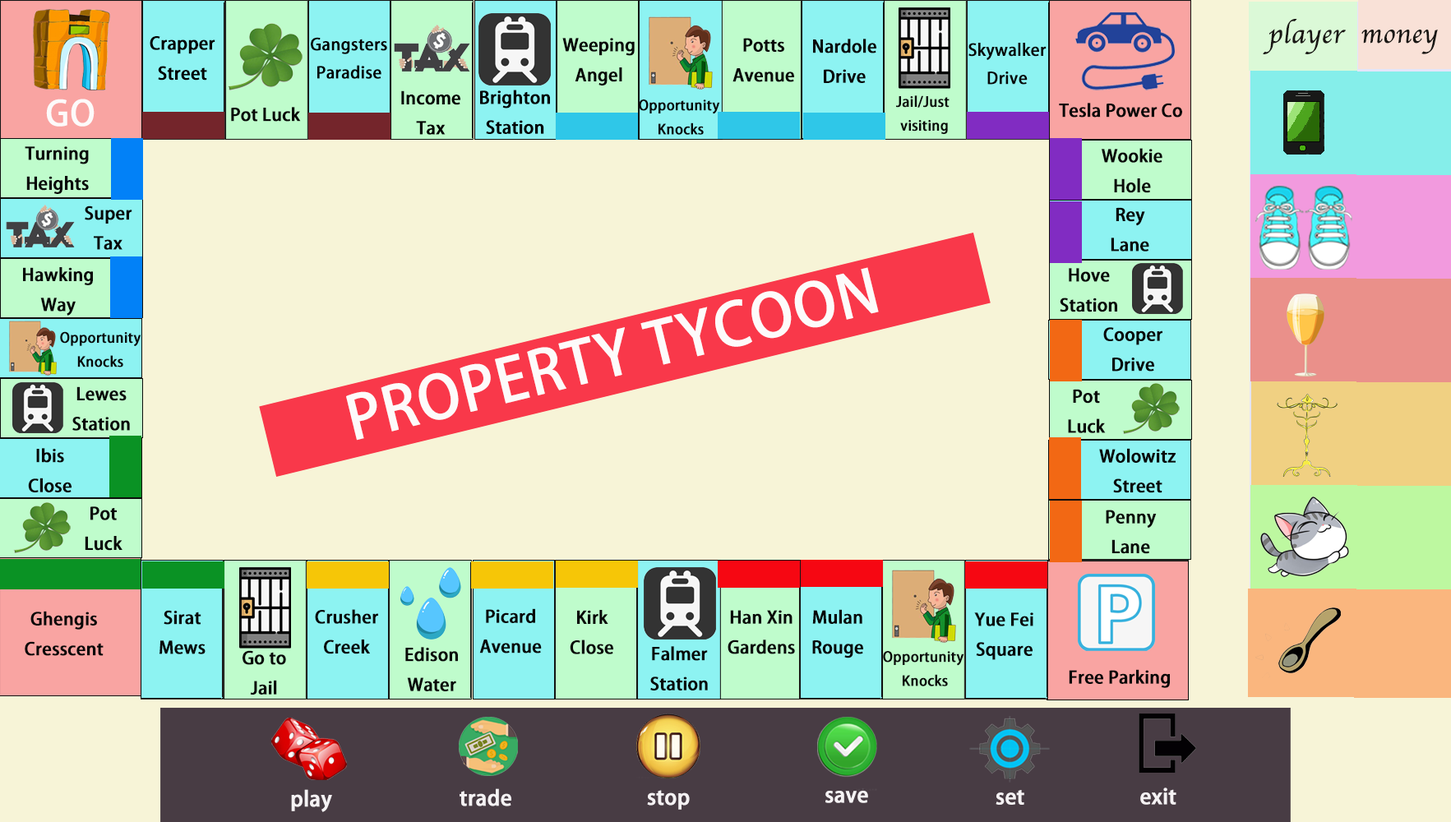
<style>
.page{position:relative;width:1451px;height:822px;background:#f7f4d7}
.page>*{position:absolute;margin:0}
.t1{font:27.4px "Apple-Chancery";color:#191714;font-weight:bold}
.t2{font:17.1px "AdobeHeitiStd-Regular";color:#020202;font-weight:bold}
.t3{font:16.1px "AdobeHeitiStd-Regular";color:#020202;font-weight:bold}
.t4{font:17.1px "AdobeHeitiStd-Regular";color:#070707;font-weight:bold}
.t5{font:17.1px "AdobeHeitiStd-Regular";color:#080808;font-weight:bold}
.t6{font:16.1px "AdobeHeitiStd-Regular";color:#080808;font-weight:bold}
.t7{font:34.2px "AdobeHeitiStd-Regular";color:#fdfafa;font-weight:bold}
.t8{font:13.7px "AdobeHeitiStd-Regular";color:#080808;font-weight:bold}
.t9{font:59px "AdobeHeitiStd-Regular";color:#fdfafa;font-weight:bold}
.t10{font:20.5px "AdobeHeitiStd-Regular";color:#f5f2f4;font-weight:bold}
</style>
<div class="page">
<p class="t1" style="left:1263px;top:19px;width:83px;height:35px">player</p>
<p class="t1" style="left:1361px;top:30px;width:77px;height:24px">money</p>
<p class="t2" style="left:150px;top:36px;width:65px;height:45px;text-align:center">Crapper<br>Street</p>
<p class="t3" style="left:311px;top:37px;width:76px;height:42px;text-align:center">Gangsters<br>Paradise</p>
<p class="t4" style="left:562px;top:38px;width:73px;height:47px;text-align:center">Weeping<br>Angel</p>
<p class="t5" style="left:732px;top:38px;width:62px;height:44px;text-align:center">Potts<br>Avenue</p>
<p class="t5" style="left:813px;top:39px;width:63px;height:44px;text-align:center">Nardole<br>Drive</p>
<p class="t6" style="left:968px;top:43px;width:78px;height:42px;text-align:center">Skywalker<br>Drive</p>
<p class="t2" style="left:480px;top:90px;width:70px;height:44px;text-align:center">Brighton<br>Station</p>
<p class="t7" style="left:46px;top:99px;width:49px;height:28px">GO</p>
<p class="t2" style="left:401px;top:90px;width:59px;height:45px;text-align:center">Income<br>Tax</p>
<p class="t8" style="left:639px;top:99px;width:81px;height:36px;text-align:center">Opportunity <br>Knocks</p>
<p class="t8" style="left:896px;top:95px;width:53px;height:39px;text-align:center">Jail/Just <br>visiting</p>
<p class="t5" style="left:231px;top:107px;width:70px;height:15px">Pot Luck</p>
<p class="t5" style="left:1059px;top:103px;width:123px;height:15px">Tesla Power Co</p>
<p class="t5" style="left:25px;top:146px;width:64px;height:48px;text-align:center">Turning<br>Heights</p>
<p class="t5" style="left:1101px;top:148px;width:61px;height:45px;text-align:center">Wookie<br>Hole</p>
<p class="t5" style="left:85px;top:205px;width:47px;height:45px;text-align:center">Super<br>Tax</p>
<p class="t5" style="left:1110px;top:207px;width:39px;height:45px;text-align:center">Rey<br>Lane</p>
<p class="t5" style="left:23px;top:267px;width:70px;height:49px;text-align:center">Hawking<br>Way</p>
<p class="t9" style="left:346px;top:267px;width:533px;height:174px;rotate:-14deg">PROPERTY TYCOON</p>
<p class="t5" style="left:1059px;top:268px;width:58px;height:44px;text-align:center">Hove<br>Station</p>
<p class="t5" style="left:1103px;top:327px;width:59px;height:45px;text-align:center">Cooper<br>Drive</p>
<p class="t8" style="left:60px;top:331px;width:81px;height:36px;text-align:center">Opportunity<br>Knocks</p>
<p class="t5" style="left:72px;top:386px;width:58px;height:45px;text-align:center">Lewes<br>Station</p>
<p class="t5" style="left:1068px;top:389px;width:38px;height:44px;text-align:center">Pot<br>Luck</p>
<p class="t5" style="left:28px;top:448px;width:44px;height:44px;text-align:center">Ibis<br>Close</p>
<p class="t5" style="left:1099px;top:448px;width:76px;height:45px;text-align:center">Wolowitz<br>Street</p>
<p class="t5" style="left:85px;top:506px;width:37px;height:45px;text-align:center">Pot<br>Luck</p>
<p class="t5" style="left:1106px;top:510px;width:50px;height:44px;text-align:center">Penny<br>Lane</p>
<p class="t5" style="left:25px;top:611px;width:79px;height:45px;text-align:center">Ghengis<br>Cresscent</p>
<p class="t5" style="left:159px;top:610px;width:46px;height:44px;text-align:center">Sirat<br>Mews</p>
<p class="t5" style="left:315px;top:609px;width:63px;height:45px;text-align:center">Crusher<br>Creek</p>
<p class="t5" style="left:479px;top:608px;width:63px;height:45px;text-align:center">Picard<br>Avenue</p>
<p class="t5" style="left:570px;top:610px;width:43px;height:44px;text-align:center">Kirk<br>Close</p>
<p class="t5" style="left:727px;top:610px;width:68px;height:44px;text-align:center">Han Xin<br>Gardens</p>
<p class="t5" style="left:812px;top:609px;width:51px;height:49px;text-align:center">Mulan<br>Rouge</p>
<p class="t5" style="left:974px;top:612px;width:59px;height:48px;text-align:center">Yue Fei<br>Square</p>
<p class="t5" style="left:242px;top:650px;width:44px;height:45px;text-align:center">Go to<br>Jail</p>
<p class="t5" style="left:405px;top:647px;width:53px;height:44px;text-align:center">Edison<br>Water</p>
<p class="t5" style="left:650px;top:646px;width:58px;height:44px;text-align:center">Falmer<br>Station</p>
<p class="t8" style="left:883px;top:651px;width:81px;height:35px;text-align:center">Opportunity <br>Knocks</p>
<p class="t5" style="left:1069px;top:669px;width:101px;height:19px">Free Parking</p>
<p class="t10" style="left:291px;top:789px;width:41px;height:23px">play</p>
<p class="t10" style="left:459px;top:788px;width:52px;height:18px">trade</p>
<p class="t10" style="left:647px;top:790px;width:43px;height:20px">stop</p>
<p class="t10" style="left:825px;top:791px;width:43px;height:12px">save</p>
<p class="t10" style="left:995px;top:790px;width:29px;height:15px">set</p>
<p class="t10" style="left:1140px;top:787px;width:36px;height:18px">exit</p>
</div>
